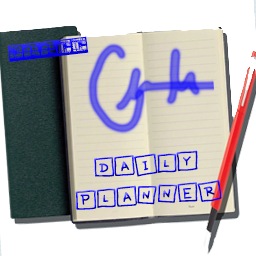
<style>
.page{position:relative;width:256px;height:256px;background:#ffffff}
.page>*{position:absolute;margin:0}
.t1{font:20.2px "WholecarPERSONALUSEONLY-Regular"}
.t2{font:25.6px "CuteNotes"}
</style>
<div class="page">
<p class="t1" style="left:7px;top:36px;width:82px;height:26px;rotate:-7deg">jaacc</p>
<p class="t2" style="left:75px;top:150px;width:147px;height:60px;text-align:center;rotate:-4deg">Daily<br>Planner</p>
</div>
